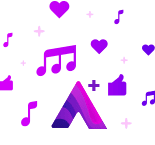
<style>
.page{position:relative;width:155px;height:145px;background:#ffffff}
.page>*{position:absolute;margin:0}
.t1{font:20.8px "Arial-Black";color:#7719c3}
</style>
<div class="page">
<p class="t1" style="left:88px;top:80px;width:12px;height:11px">+</p>
</div>
